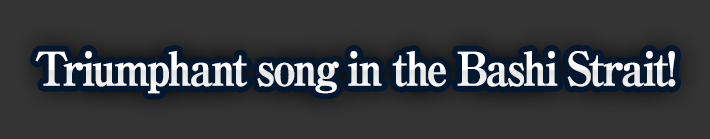
<style>
.page{position:relative;width:710px;height:139px;background:#333333}
.page>*{position:absolute;margin:0}
.t1{font:46px "RyuminPro-ExBold";letter-spacing:-0.08em;color:#ffffff;font-weight:bold;scale:0.9 1}
</style>
<div class="page">
<p class="t1" style="left:35px;top:51px;width:641px;height:43px">Triumphant song in the Bashi Strait!</p>
</div>
